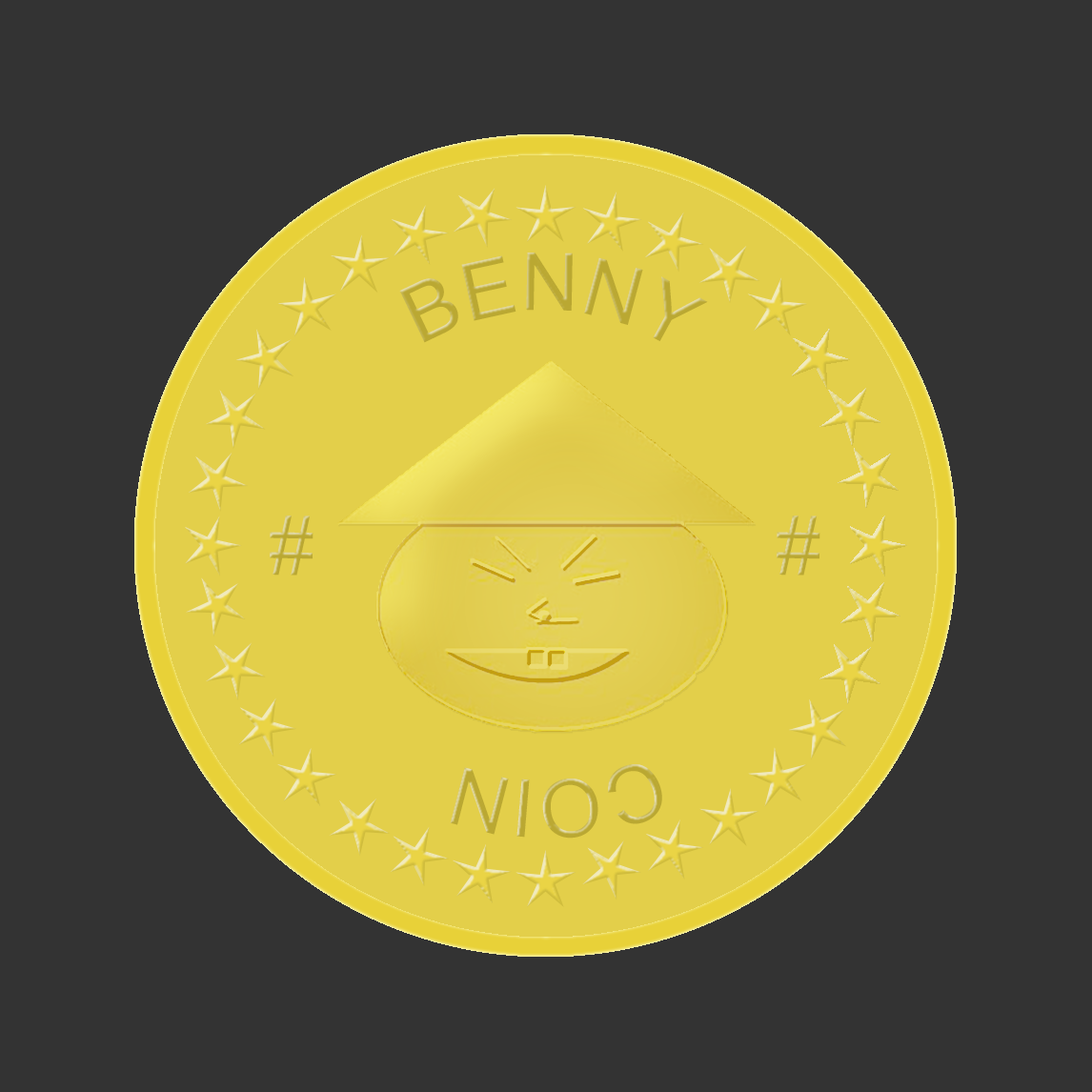
<style>
.page{position:relative;width:1092px;height:1092px;background:#333333}
.page>*{position:absolute;margin:0}
.t1{font:80px "ArialMT";color:#baa833}
.t2{font:80px "ArialMT"}
</style>
<div class="page">
<p class="t1" style="left:399px;top:253px;width:309px;height:90px">BENNY</p>
<p class="t2" style="left:270px;top:516px;width:43px;height:60px;rotate:90deg">#</p>
<p class="t2" style="left:777px;top:516px;width:43px;height:60px;rotate:90deg">#</p>
<p class="t2" style="left:450px;top:764px;width:212px;height:75px">COIN</p>
</div>
